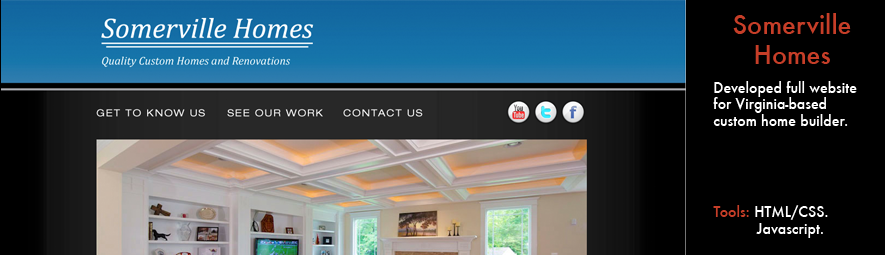
<style>
.page{position:relative;width:885px;height:255px;background:#000000}
.page>*{position:absolute;margin:0}
.t1{font:25px "Futura-Medium";color:#c63e28}
.t2{font:14px "Futura-Medium";color:#ffffff}
.t3{font:14px "Futura-Medium";color:#c63e28}
</style>
<div class="page">
<p class="t1" style="left:733px;top:13px;width:118px;height:51px;text-align:center">Somerville<br>Homes</p>
<p class="t2" style="left:713px;top:81px;width:144px;height:45px">Developed full website for Virginia-based custom home builder.</p>
<p class="t2" style="left:713px;top:205px;width:115px;height:33px"><span class="t3">Tools: </span>HTML/CSS.<br>          Javascript.</p>
</div>
